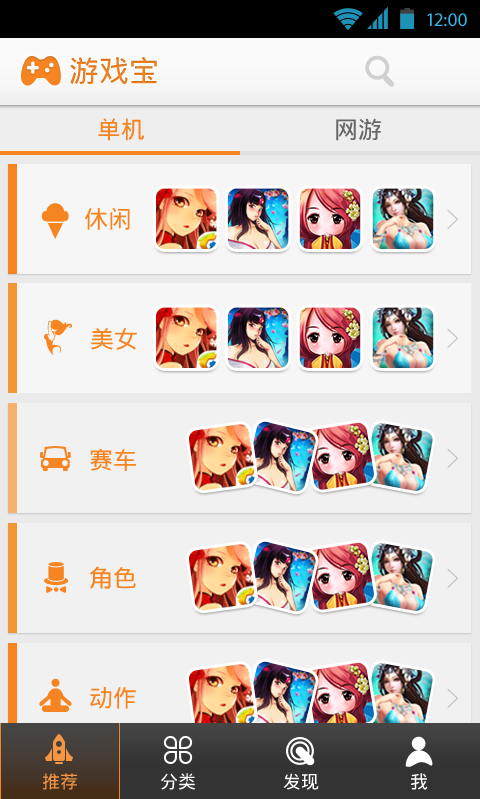
<style>
.page{position:relative;width:480px;height:799px;background:#f1f1f1}
.page>*{position:absolute;margin:0}
.t1{font:19.4px "MyriadPro-Regular";color:#33b5e5}
.t2{font:30px "DroidSansFallback";color:#f68521}
.t3{font:24px "DroidSansFallback";color:#f68521}
.t4{font:24px "DroidSansFallback";color:#676767}
.t5{font:18px "DroidSansFallback";color:#f49643}
.t6{font:18px "DroidSansFallback";color:#ffffff}
</style>
<div class="page">
<p class="t1" style="left:427px;top:13px;width:40px;height:14px">12:00</p>
<p class="t2" style="left:70px;top:57px;width:87px;height:28px">游戏宝</p>
<p class="t3" style="left:98px;top:118px;width:46px;height:23px">单机</p>
<p class="t4" style="left:336px;top:118px;width:45px;height:23px">网游</p>
<p class="t3" style="left:85px;top:208px;width:45px;height:22px">休闲</p>
<p class="t3" style="left:91px;top:328px;width:46px;height:22px">美女</p>
<p class="t3" style="left:90px;top:449px;width:46px;height:22px">赛车</p>
<p class="t3" style="left:89px;top:566px;width:47px;height:23px">角色</p>
<p class="t3" style="left:90px;top:687px;width:46px;height:22px">动作</p>
<p class="t5" style="left:42px;top:773px;width:35px;height:17px">推荐</p>
<p class="t6" style="left:161px;top:773px;width:34px;height:17px">分类</p>
<p class="t6" style="left:283px;top:773px;width:36px;height:17px">发现</p>
<p class="t6" style="left:411px;top:773px;width:17px;height:17px">我</p>
</div>
